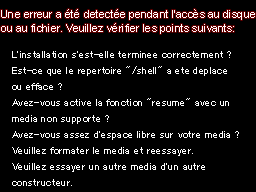
<style>
.page{position:relative;width:256px;height:192px;background:#000000}
.page>*{position:absolute;margin:0}
.t1{font:11px/14px "ArialMT";color:#ffffff}
.t2{font:11px/16px "MS-UIGothic";color:#ffffff}
</style>
<div class="page">
<p class="t1" style="left:1px;top:9px;width:254px;height:25px">Une erreur a été detectée pendant l'accès au disque<br>ou au fichier. Veuillez vérifier les points suivants:</p>
<p class="t2" style="left:12px;top:51px;width:227px;height:135px">L'installation s'est-elle terminée correctement ?<br>Est-ce que le répertoire "/shell" a été déplacé<br>ou effacé ?<br>Avez-vous activé la fonction "resume" avec un<br>media non supporté ?<br>Avez-vous assez d'espace libre sur votre media ?<br>Veuillez formater le media et réessayer.<br>Veuillez essayer un autre media d'un autre<br>constructeur.</p>
</div>
